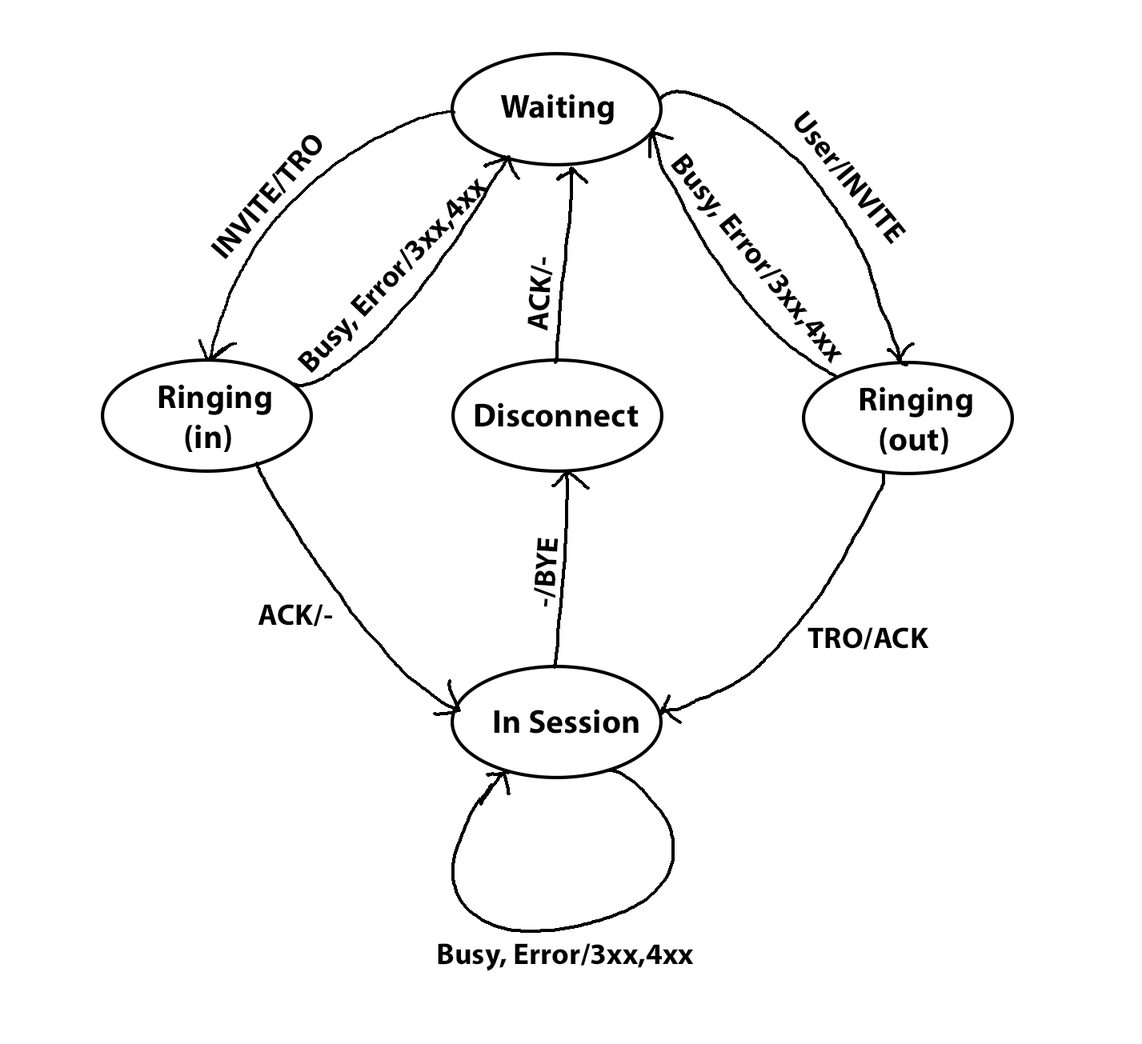
<style>
.page{position:relative;width:1142px;height:1044px;background:#ffffff}
.page>*{position:absolute;margin:0}
.t1{font:33.3px "MyriadPro-Bold";color:#000000}
.t2{font:30px "MyriadPro-Bold";color:#000000}
</style>
<div class="page">
<p class="t1" style="left:500px;top:94px;width:114px;height:31px">Waiting</p>
<p class="t2" style="left:794px;top:110px;width:113px;height:135px;rotate:51deg">User/INVITE</p>
<p class="t2" style="left:210px;top:134px;width:112px;height:126px;rotate:-49deg">INVITE/TRO</p>
<p class="t2" style="left:671px;top:153px;width:172px;height:211px;rotate:51deg">Busy, Error/3xx,4xx</p>
<p class="t2" style="left:297px;top:178px;width:191px;height:196px;rotate:-46deg">Busy, Error/3xx,4xx</p>
<p class="t2" style="left:527px;top:257px;width:26px;height:74px;rotate:-86deg">ACK/-</p>
<p class="t1" style="left:158px;top:384px;width:113px;height:68px">Ringing<br>    (in)</p>
<p class="t1" style="left:859px;top:386px;width:113px;height:69px">Ringing<br>   (out)</p>
<p class="t1" style="left:475px;top:403px;width:164px;height:24px">Disconnect</p>
<p class="t2" style="left:534px;top:538px;width:25px;height:69px;rotate:-86deg">-/BYE</p>
<p class="t2" style="left:258px;top:604px;width:74px;height:23px">ACK/-</p>
<p class="t2" style="left:807px;top:627px;width:122px;height:23px">TRO/ACK</p>
<p class="t1" style="left:494px;top:709px;width:145px;height:25px">In Session</p>
<p class="t2" style="left:438px;top:943px;width:256px;height:28px">Busy, Error/3xx,4xx</p>
</div>
